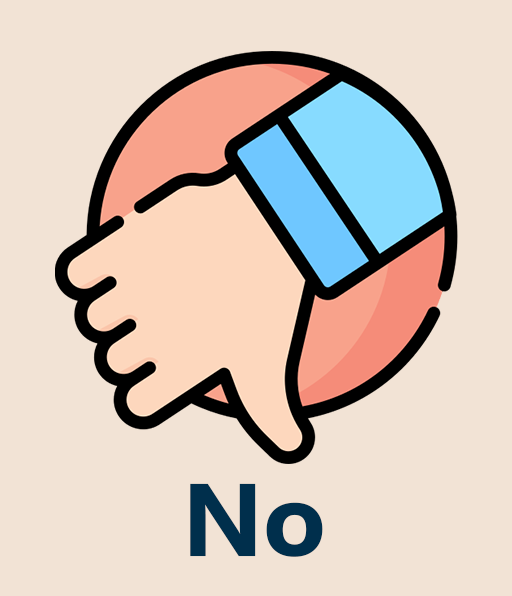
<style>
.page{position:relative;width:512px;height:596px;background:#f2e3d5}
.page>*{position:absolute;margin:0}
.t1{font:103.1px "MicrosoftPhagsPa-Bold";color:#002f4c}
</style>
<div class="page">
<p class="t1" style="left:190px;top:483px;width:133px;height:74px">No</p>
</div>
